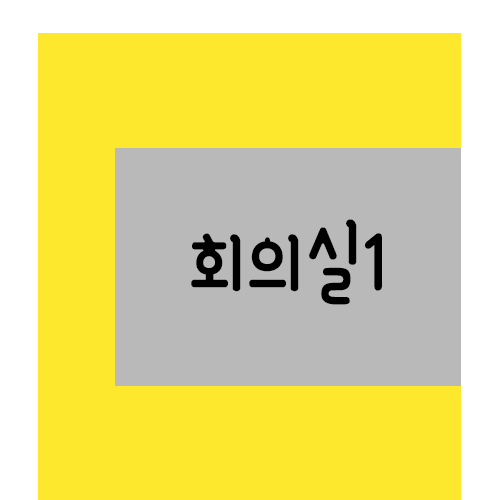
<style>
.page{position:relative;width:500px;height:500px;background:#fee82d}
.page>*{position:absolute;margin:0}
.t1{font:100px "YanoljaYacheR";color:#000000;scale:0.94 1}
</style>
<div class="page">
<p class="t1" style="left:191px;top:219px;width:191px;height:86px">회의실1</p>
</div>
